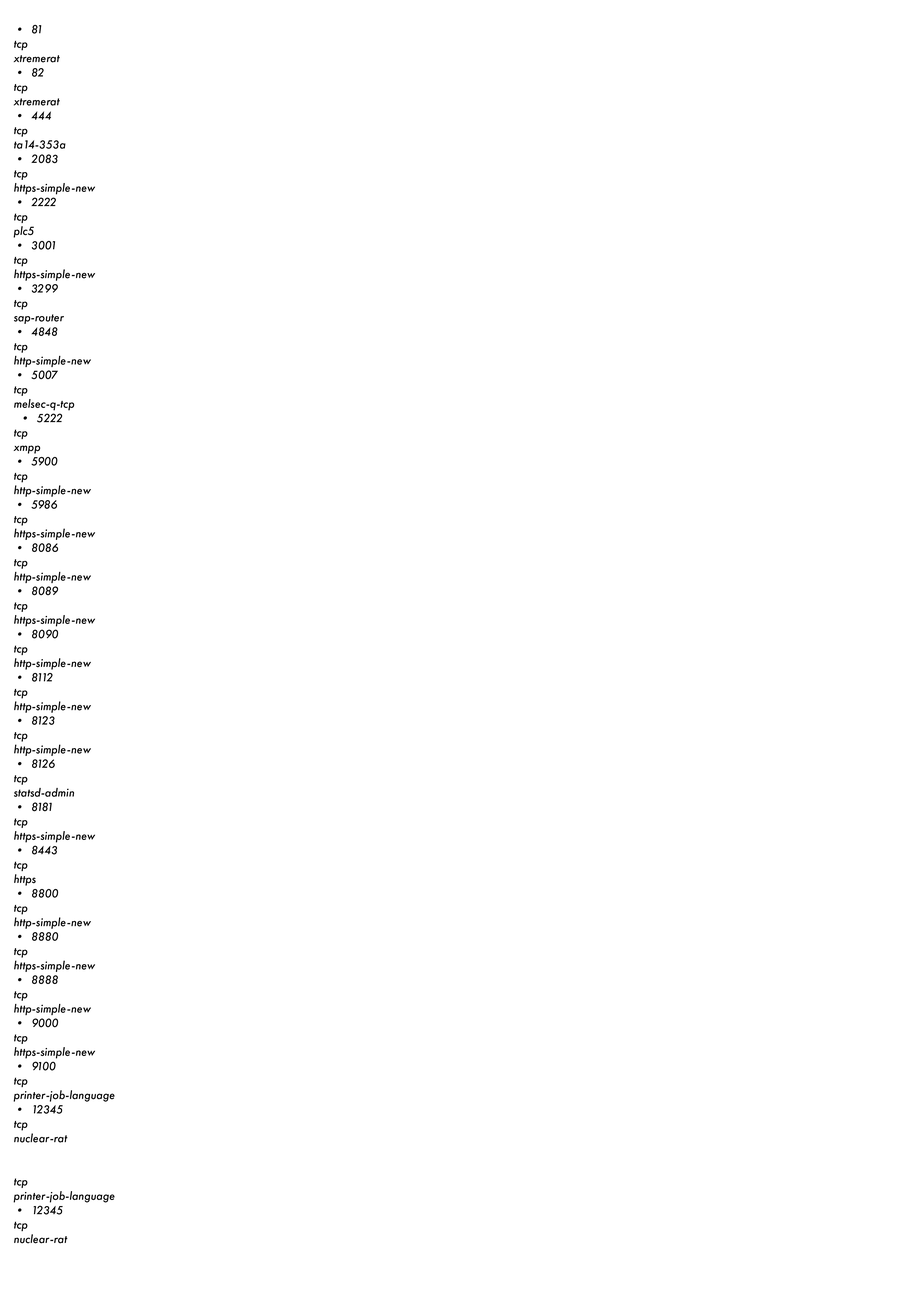
<style>
.page{position:relative;width:918px;height:1299px;background:#ffffff}
.page>*{position:absolute;margin:0}
.t1{font:12px "FuturaPT-MediumObl";color:#000000}
</style>
<div class="page">
<p class="t1" style="left:13px;top:25px;width:102px;height:1218px">•  81<br>tcp<br>xtremerat<br>•  82<br>tcp<br>xtremerat<br>•  444<br>tcp<br>ta14-353a<br>•  2083<br>tcp<br>https-simple-new<br>•  2222<br>tcp<br>plc5<br>•  3001<br>tcp<br>https-simple-new<br>•  3299<br>tcp<br>sap-router<br>•  4848<br>tcp<br>http-simple-new<br>•  5007<br>tcp<br>melsec-q-tcp<br>  •  5222<br>tcp<br>xmpp<br>•  5900<br>tcp<br>http-simple-new<br>•  5986<br>tcp<br>https-simple-new<br>•  8086<br>tcp<br>http-simple-new<br>•  8089<br>tcp<br>https-simple-new<br>•  8090<br>tcp<br>http-simple-new<br>•  8112<br>tcp<br>http-simple-new<br>•  8123<br>tcp<br>http-simple-new<br>•  8126<br>tcp<br>statsd-admin<br>•  8181<br>tcp<br>https-simple-new<br>•  8443<br>tcp<br>https<br>•  8800<br>tcp<br>http-simple-new<br>•  8880<br>tcp<br>https-simple-new<br>•  8888<br>tcp<br>http-simple-new<br>•  9000<br>tcp<br>https-simple-new<br>•  9100<br>tcp<br>printer-job-language<br>•  12345<br>tcp<br>nuclear-rat<br>  <br><br>tcp<br>printer-job-language<br>•  12345<br>tcp<br>nuclear-rat</p>
</div>
